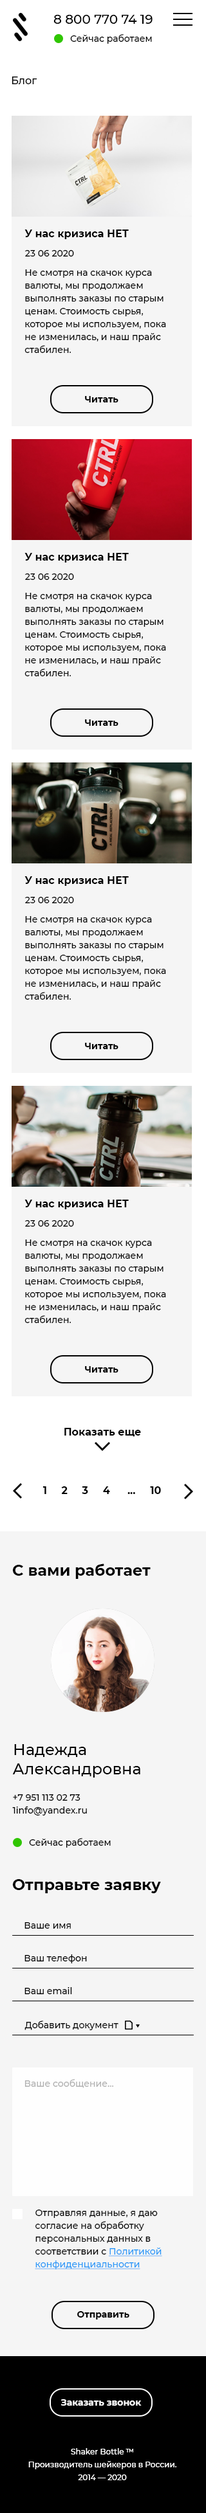
<style>
.page{position:relative;width:206px;height:2513px;background:#f5f5f5}
.page>*{position:absolute;margin:0}
.t1{font:12.9px "Montserrat-Medium";color:#000000}
.t2{font:9px "Montserrat-Medium";color:#000000}
.t3{font:10.3px "Montserrat-Medium";color:#000000}
.t4{font:10.3px "Montserrat-Bold";color:#000000}
.t5{font:9px/12.9px "Montserrat-Medium";color:#000000}
.t6{font:9px "Montserrat-Bold";color:#000000}
.t7{font:15.4px "Montserrat-Bold";color:#010101}
.t8{font:15.4px/19.3px "Montserrat-Medium";color:#000000}
.t9{font:9px "Montserrat-Medium";color:#b1b1b1}
.t10{font:9px/12.9px "Montserrat-Medium";color:#2899f8;text-decoration:underline}
.t11{font:9px "Montserrat-Bold";color:#010101}
.t12{font:9px "Montserrat-Bold";color:#ffffff}
.t13{font:7.7px/12.9px "Montserrat-Medium";color:#ffffff}
</style>
<div class="page">
<p class="t1" style="left:53px;top:15px;width:99px;height:9px">8 800 770 74 19</p>
<p class="t2" style="left:70px;top:34px;width:82px;height:10px">Сейчас работаем</p>
<p class="t3" style="left:12px;top:76px;width:25px;height:8px">Блог</p>
<p class="t4" style="left:24px;top:230px;width:105px;height:9px">У нас кризиса НЕТ</p>
<p class="t2" style="left:25px;top:250px;width:49px;height:6px">23 06 2020</p>
<p class="t5" style="left:24px;top:269px;width:142px;height:84px;text-align:right">Не смотря на скачок курса валюты, мы продолжаем выполнять заказы по старым ценам. Стоимость сырья, которое мы используем, пока не изменилась, и наш прайс стабилен.</p>
<p class="t6" style="left:85px;top:396px;width:33px;height:6px">Читать</p>
<p class="t4" style="left:24px;top:553px;width:105px;height:9px">У нас кризиса НЕТ</p>
<p class="t2" style="left:25px;top:573px;width:49px;height:7px">23 06 2020</p>
<p class="t5" style="left:24px;top:593px;width:142px;height:83px;text-align:right">Не смотря на скачок курса валюты, мы продолжаем выполнять заказы по старым ценам. Стоимость сырья, которое мы используем, пока не изменилась, и наш прайс стабилен.</p>
<p class="t6" style="left:85px;top:719px;width:33px;height:7px">Читать</p>
<p class="t4" style="left:24px;top:876px;width:105px;height:10px">У нас кризиса НЕТ</p>
<p class="t2" style="left:25px;top:897px;width:49px;height:6px">23 06 2020</p>
<p class="t5" style="left:24px;top:916px;width:142px;height:84px;text-align:right">Не смотря на скачок курса валюты, мы продолжаем выполнять заказы по старым ценам. Стоимость сырья, которое мы используем, пока не изменилась, и наш прайс стабилен.</p>
<p class="t6" style="left:85px;top:1043px;width:33px;height:6px">Читать</p>
<p class="t4" style="left:24px;top:1200px;width:105px;height:9px">У нас кризиса НЕТ</p>
<p class="t2" style="left:25px;top:1220px;width:49px;height:7px">23 06 2020</p>
<p class="t5" style="left:24px;top:1239px;width:142px;height:84px;text-align:right">Не смотря на скачок курса валюты, мы продолжаем выполнять заказы по старым ценам. Стоимость сырья, которое мы используем, пока не изменилась, и наш прайс стабилен.</p>
<p class="t6" style="left:85px;top:1366px;width:33px;height:6px">Читать</p>
<p class="t4" style="left:64px;top:1428px;width:77px;height:9px">Показать еще</p>
<p class="t4" style="left:42px;top:1486px;width:119px;height:8px">1     2     3     4      ...     10</p>
<p class="t7" style="left:12px;top:1563px;width:138px;height:16px">С вами работает</p>
<p class="t8" style="left:12px;top:1744px;width:128px;height:34px;text-align:right">Надежда<br>Александровна</p>
<p class="t5" style="left:12px;top:1794px;width:75px;height:21px;text-align:right">+7 951 113 02 73<br>1info@yandex.ru</p>
<p class="t2" style="left:29px;top:1838px;width:82px;height:10px">Сейчас работаем</p>
<p class="t7" style="left:12px;top:1879px;width:149px;height:14px">Отправьте заявку</p>
<p class="t2" style="left:24px;top:1922px;width:47px;height:7px">Ваше имя</p>
<p class="t2" style="left:24px;top:1954px;width:63px;height:9px">Ваш телефон</p>
<p class="t2" style="left:24px;top:1987px;width:48px;height:7px">Ваш email</p>
<p class="t2" style="left:24px;top:2021px;width:94px;height:9px">Добавить документ</p>
<p class="t9" style="left:24px;top:2079px;width:89px;height:9px">Ваше сообщение...</p>
<p class="t5" style="left:35px;top:2210px;width:127px;height:59px;text-align:right">Отправляя данные, я даю согласие на обработку персональных данных в соответствии с <span class="t10">Политикой конфиденциальности</span></p>
<p class="t11" style="left:77px;top:2311px;width:52px;height:8px">Отправить</p>
<p class="t12" style="left:60px;top:2399px;width:81px;height:7px">Заказать звонок</p>
<p class="t13" style="left:28px;top:2448px;width:148px;height:32px;text-align:center">Shaker Bottle ™ <br>Производитель шейкеров в России. <br>2014 — 2020</p>
</div>
